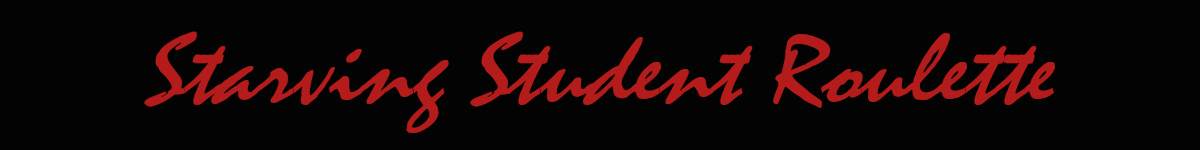
<style>
.page{position:relative;width:1200px;height:150px;background:#030303}
.page>*{position:absolute;margin:0}
.t1{font:101px "Mistral";color:#b41b1b;font-style:italic;scale:1.11 1}
</style>
<div class="page">
<p class="t1" style="left:144px;top:31px;width:911px;height:102px">Starving Student Roulette</p>
</div>
